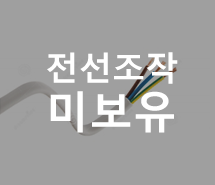
<style>
.page{position:relative;width:215px;height:185px;background:#9f9f9f}
.page>*{position:absolute;margin:0}
.t1{font:33.3px "MalgunGothicBold";color:#ffffff}
.t2{font:43.8px "MalgunGothicBold";color:#ffffff}
</style>
<div class="page">
<p class="t1" style="left:47px;top:52px;width:131px;height:32px">전선조작</p>
<p class="t2" style="left:50px;top:91px;width:124px;height:42px">미보유</p>
</div>
